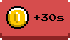
<style>
.page{position:relative;width:70px;height:40px;background:#d64d4d}
.page>*{position:absolute;margin:0}
.t1{font:8px "PressStart2P-Regular";color:#000000}
</style>
<div class="page">
<p class="t1" style="left:33px;top:14px;width:31px;height:7px">+30s</p>
</div>
